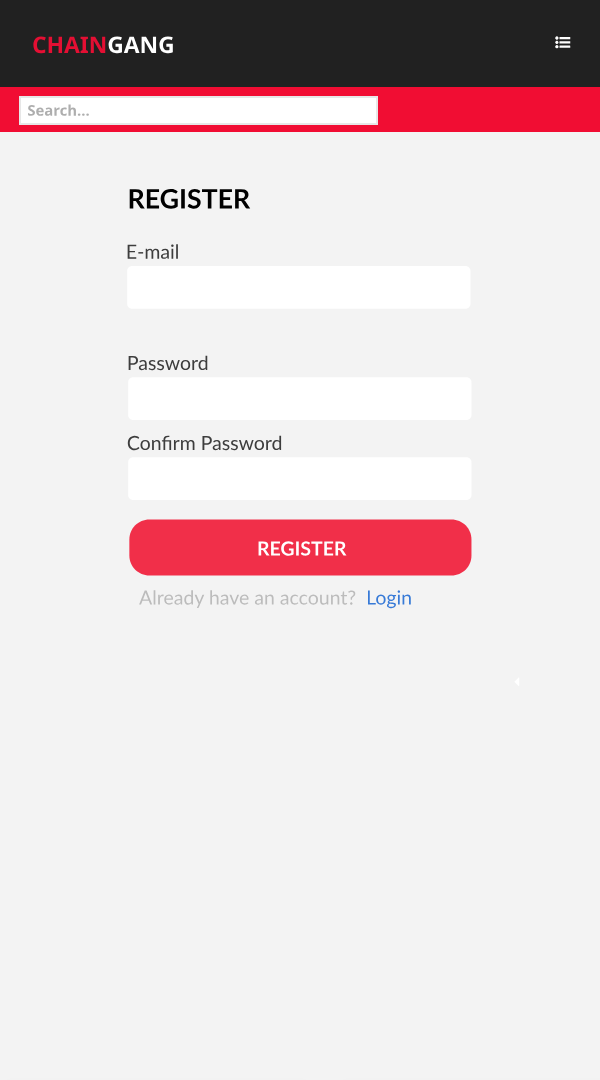
<style>
.page{position:relative;width:600px;height:1080px;background:#f3f3f3}
.page>*{position:absolute;margin:0}
.t1{font:22.8px "NotoSans-Bold";color:#e40f33}
.t2{font:22.8px "NotoSans-Bold";color:#ffffff}
.t3{font:14.8px "NotoSans-Bold";color:#aeaeae}
.t4{font:26.7px "Lato-Bold";color:#000000;text-transform:uppercase}
.t5{font:19.5px "Lato-Regular";color:#3d3d3d}
.t6{font:19.5px "Lato-Bold";color:#ffffff;text-transform:uppercase}
.t7{font:19.5px "Lato-Regular";color:#bcbcbc}
.t8{font:19.5px "Lato-Regular";color:#377ad7}
</style>
<div class="page">
<p class="t1" style="left:33px;top:36px;width:140px;height:18px">CHAIN<span class="t2">GANG</span></p>
<p class="t3" style="left:28px;top:104px;width:61px;height:12px">Search...</p>
<p class="t4" style="left:129px;top:188px;width:122px;height:21px">Register</p>
<p class="t5" style="left:127px;top:244px;width:51px;height:15px">E-mail</p>
<p class="t5" style="left:128px;top:355px;width:80px;height:16px">Password</p>
<p class="t5" style="left:127px;top:435px;width:155px;height:16px">Confirm Password</p>
<p class="t6" style="left:258px;top:541px;width:89px;height:15px">register</p>
<p class="t7" style="left:139px;top:590px;width:272px;height:19px">Already have an account?  <span class="t8">Login</span></p>
</div>
